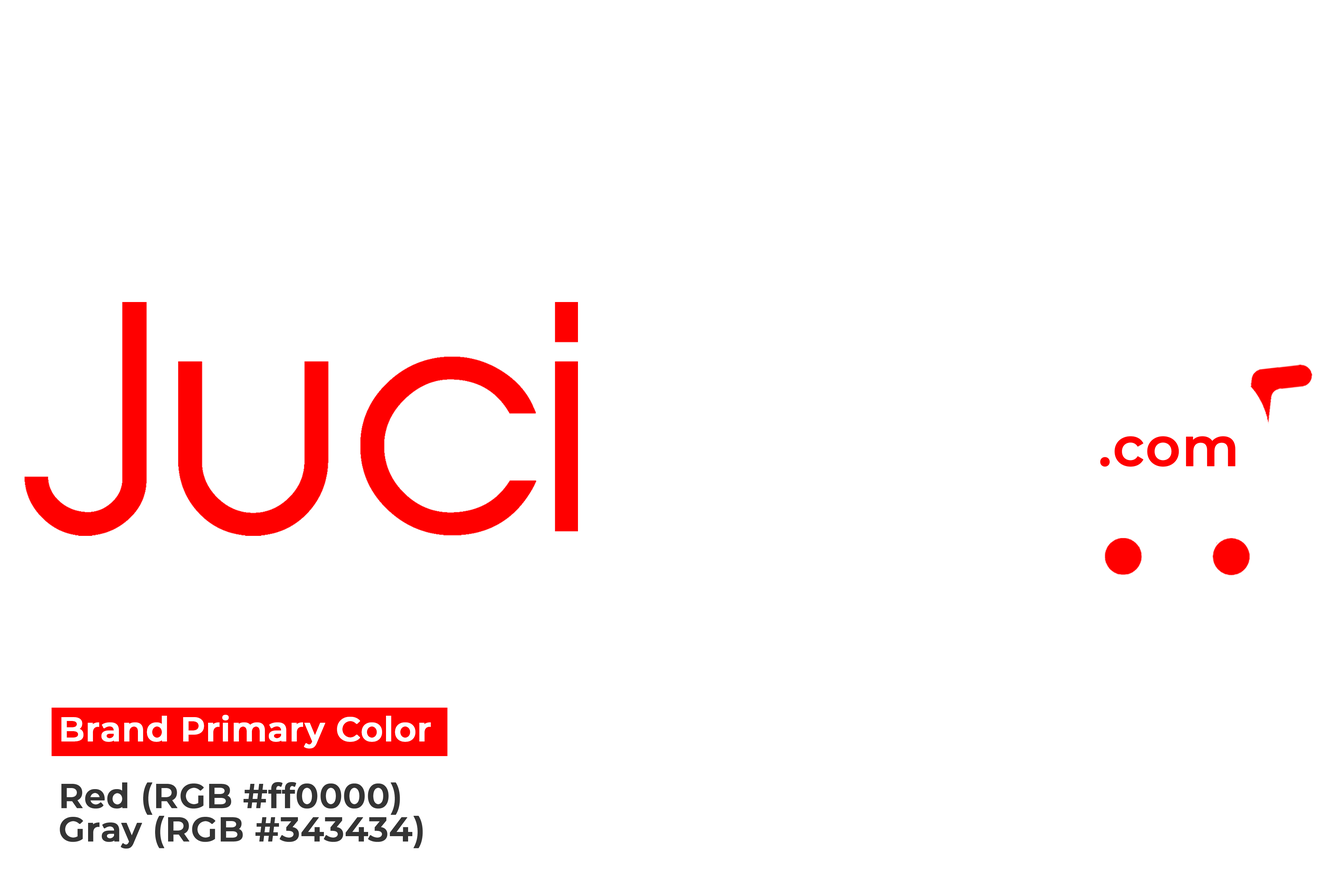
<style>
.page{position:relative;width:1337px;height:892px;background:#ffffff}
.page>*{position:absolute;margin:0}
.t1{font:54.6px "Montserrat-SemiBold";color:#ff0000;font-weight:bold}
.t2{font:33.9px/33.4px "Montserrat-SemiBold";color:#343434;font-weight:bold}
.t3{font:33.9px/33.4px "Montserrat-SemiBold";color:#ffffff;font-weight:bold}
</style>
<div class="page">
<p class="t1" style="left:1100px;top:436px;width:136px;height:31px">.com</p>
<p class="t2" style="left:60px;top:714px;width:371px;height:134px"><span class="t3">Brand Primary Color<br></span><br>Red (RGB #ff0000)<br>Gray (RGB #343434)</p>
</div>
